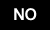
<style>
.page{position:relative;width:50px;height:30px;background:#000000}
.page>*{position:absolute;margin:0}
.t1{font:16px "HelveticaNeue-Medium";letter-spacing:-0.01em;color:#ffffff}
</style>
<div class="page">
<p class="t1" style="left:14px;top:8px;width:23px;height:13px">NO</p>
</div>
